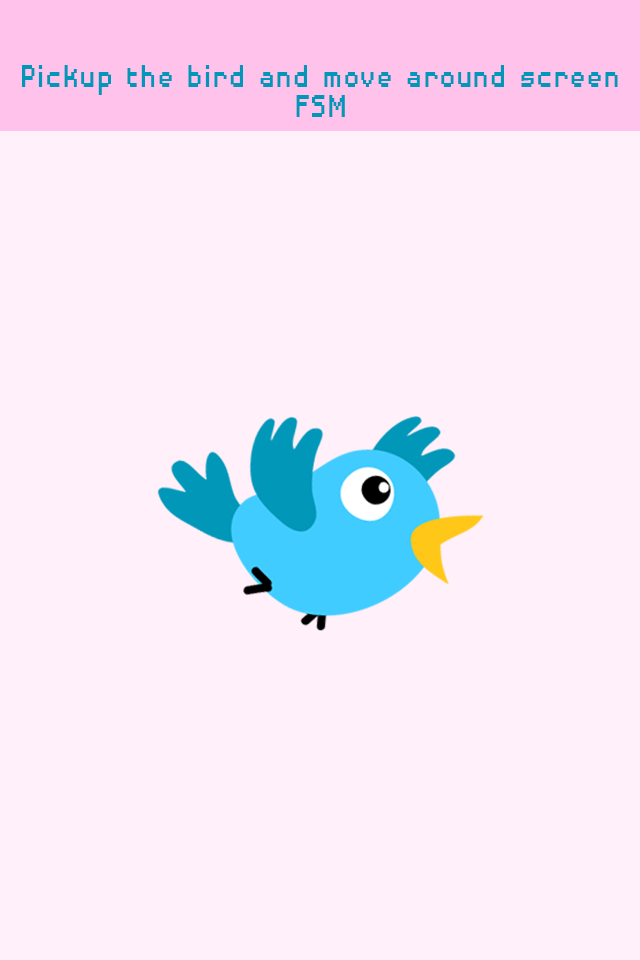
<style>
.page{position:relative;width:640px;height:960px;background:#fff0fa}
.page>*{position:absolute;margin:0}
.t1{font:42.3px/30px "DisposableDroidBB";color:#0097b8;scale:0.83 1}
</style>
<div class="page">
<p class="t1" style="left:22px;top:65px;width:596px;height:52px;text-align:center">Pickup the bird and move around screen<br>FSM</p>
</div>
